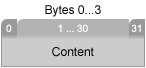
<style>
.page{position:relative;width:146px;height:68px;background:#cccccc}
.page>*{position:absolute;margin:0}
.t1{font:12px "ArialMT";color:#000000}
.t2{font:10px "ArialMT";color:#ffffff}
</style>
<div class="page">
<p class="t1" style="left:45px;top:5px;width:56px;height:12px">Bytes 0...3</p>
<p class="t2" style="left:6px;top:24px;width:6px;height:8px">0</p>
<p class="t2" style="left:58px;top:24px;width:30px;height:8px">1 ... 30</p>
<p class="t2" style="left:131px;top:24px;width:10px;height:8px">31</p>
<p class="t1" style="left:52px;top:47px;width:42px;height:10px">Content</p>
</div>
